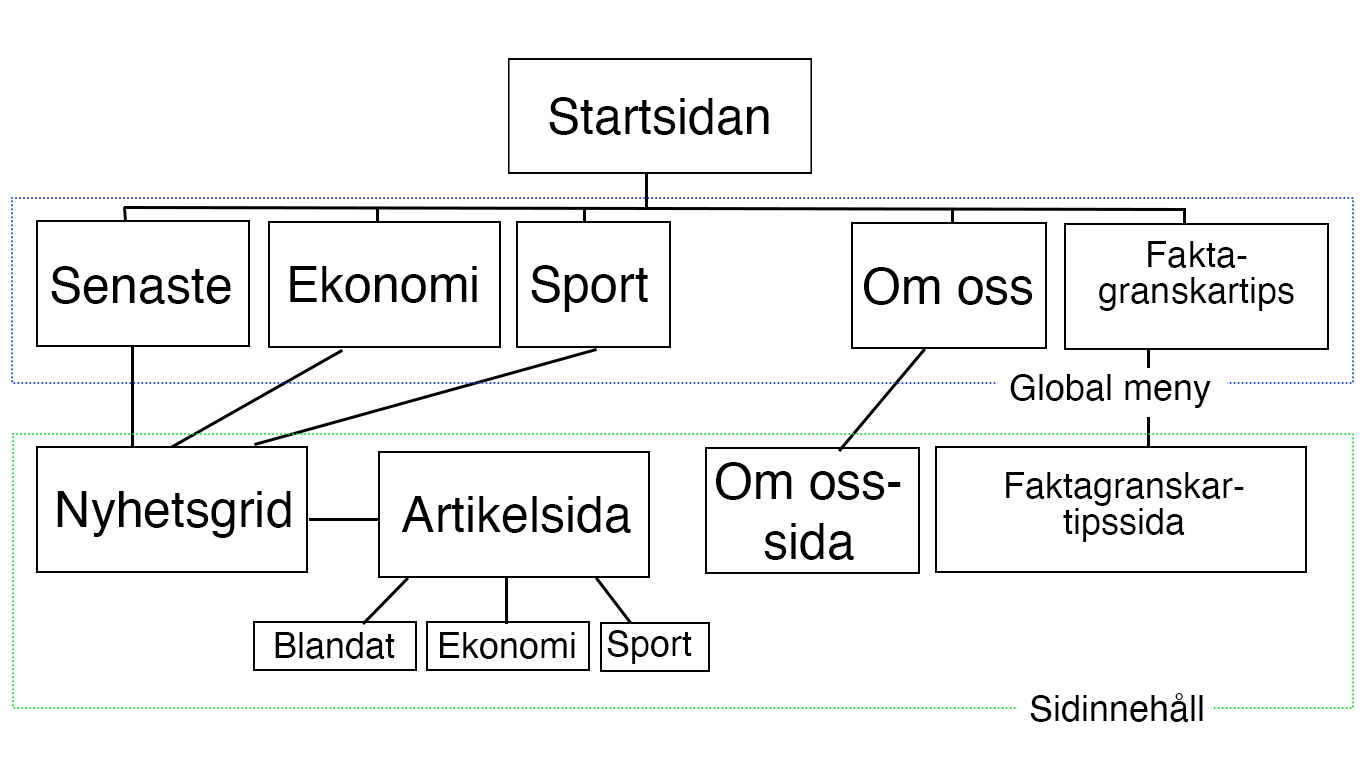
<style>
.page{position:relative;width:1366px;height:768px;background:#ffffff}
.page>*{position:absolute;margin:0}
.t1{font:50px "Helvetica";color:#000000}
.t2{font:36px/36px "Helvetica";color:#000000}
.t3{font:36px "Helvetica";color:#000000}
</style>
<div class="page">
<p class="t1" style="left:549px;top:97px;width:220px;height:38px">Startsidan</p>
<p class="t2" style="left:1099px;top:241px;width:195px;height:70px;text-align:center">Fakta-<br>granskartips</p>
<p class="t1" style="left:51px;top:266px;width:180px;height:38px">Senaste</p>
<p class="t1" style="left:290px;top:266px;width:187px;height:37px">Ekonomi</p>
<p class="t1" style="left:531px;top:265px;width:117px;height:47px">Sport</p>
<p class="t1" style="left:864px;top:267px;width:169px;height:38px">Om oss</p>
<p class="t3" style="left:1010px;top:374px;width:201px;height:34px">Global meny</p>
<p class="t1" style="left:716px;top:462px;width:185px;height:98px;text-align:center">Om oss-<br>sida</p>
<p class="t2" style="left:1006px;top:472px;width:238px;height:70px;text-align:center">Faktagranskar-<br>tipssida</p>
<p class="t1" style="left:57px;top:491px;width:234px;height:47px">Nyhetsgrid</p>
<p class="t1" style="left:401px;top:496px;width:230px;height:37px">Artikelsida</p>
<p class="t3" style="left:607px;top:630px;width:85px;height:34px">Sport</p>
<p class="t3" style="left:275px;top:632px;width:120px;height:27px">Blandat</p>
<p class="t3" style="left:440px;top:632px;width:135px;height:27px">Ekonomi</p>
<p class="t3" style="left:1030px;top:693px;width:173px;height:29px">Sidinnehåll</p>
</div>
